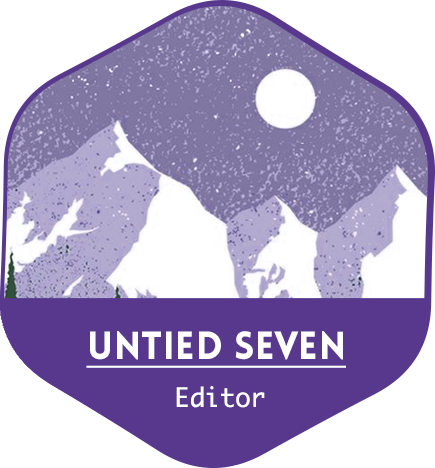
<style>
.page{position:relative;width:435px;height:468px;background:#ffffff}
.page>*{position:absolute;margin:0}
.t1{font:38.6px "LoveloBlack";color:#ffffff;text-decoration:underline}
.t2{font:25.7px "Monaco";letter-spacing:-0.01em;color:#ffffff}
</style>
<div class="page">
<p class="t1" style="left:86px;top:331px;width:260px;height:37px">Untied Seven</p>
<p class="t2" style="left:176px;top:386px;width:89px;height:22px">Editor</p>
</div>
